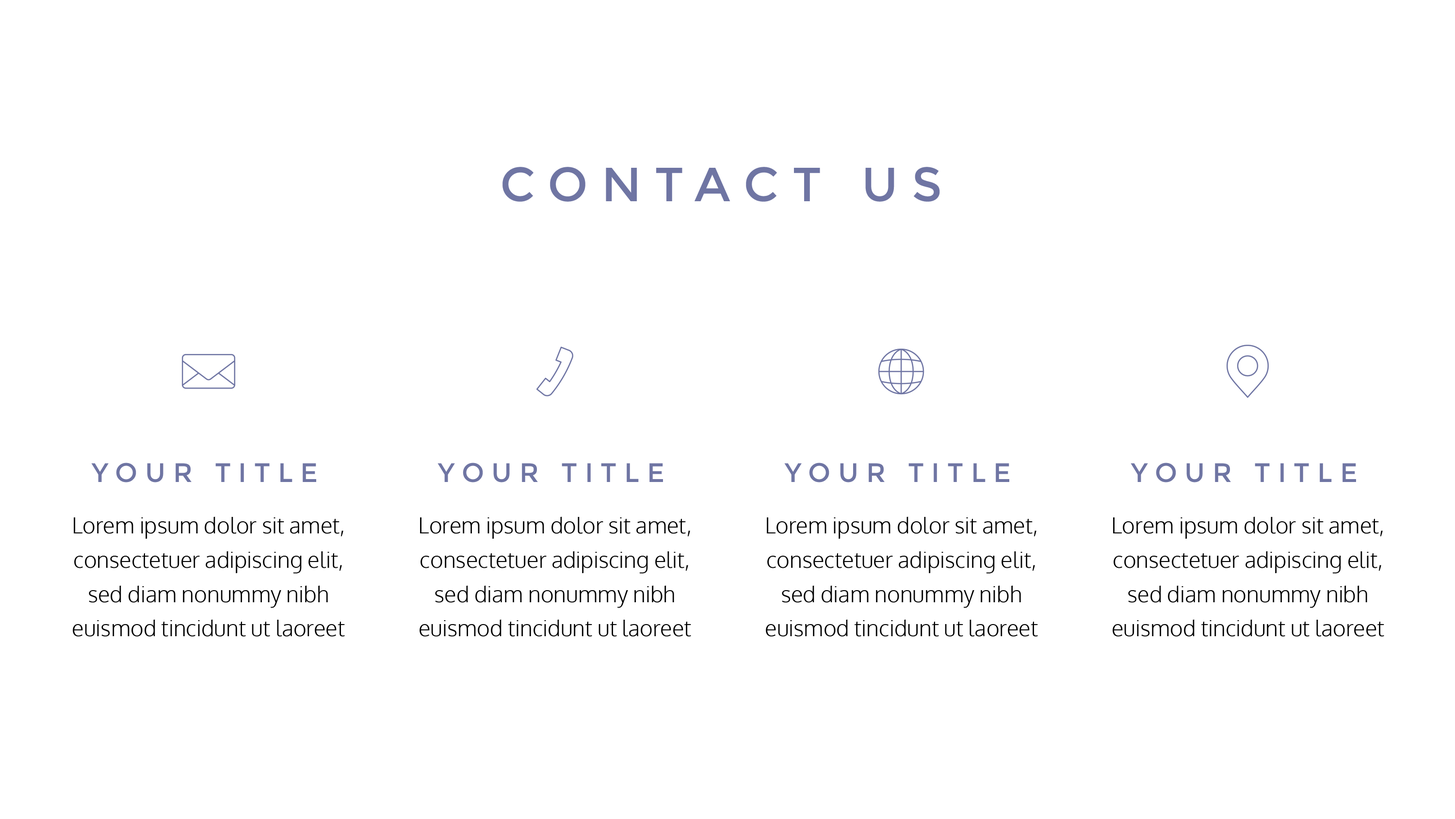
<style>
.page{position:relative;width:1455px;height:819px;background:#ffffff}
.page>*{position:absolute;margin:0}
.t1{font:47.9px "Montserrat-Regular";letter-spacing:0.28em;color:#6f75a3}
.t2{font:26.7px "Montserrat-Regular";letter-spacing:0.28em;color:#6f75a3}
.t3{font:22.2px/34.4px "Oxygen-Light";color:#000000}
</style>
<div class="page">
<p class="t1" style="left:503px;top:167px;width:437px;height:35px">CONTACT US</p>
<p class="t2" style="left:91px;top:463px;width:225px;height:20px">YOUR TITLE</p>
<p class="t2" style="left:438px;top:463px;width:225px;height:20px">YOUR TITLE</p>
<p class="t2" style="left:784px;top:463px;width:226px;height:20px">YOUR TITLE</p>
<p class="t2" style="left:1131px;top:463px;width:225px;height:20px">YOUR TITLE</p>
<p class="t3" style="left:73px;top:517px;width:272px;height:120px;text-align:center">Lorem ipsum dolor sit amet, consectetuer adipiscing elit, sed diam nonummy nibh euismod tincidunt ut laoreet dolore magna aliquam erat volutpat.</p>
<p class="t3" style="left:420px;top:517px;width:271px;height:120px;text-align:center">Lorem ipsum dolor sit amet, consectetuer adipiscing elit, sed diam nonummy nibh euismod tincidunt ut laoreet dolore magna aliquam erat volutpat.</p>
<p class="t3" style="left:766px;top:517px;width:272px;height:120px;text-align:center">Lorem ipsum dolor sit amet, consectetuer adipiscing elit, sed diam nonummy nibh euismod tincidunt ut laoreet dolore magna aliquam erat volutpat.</p>
<p class="t3" style="left:1113px;top:517px;width:272px;height:120px;text-align:center">Lorem ipsum dolor sit amet, consectetuer adipiscing elit, sed diam nonummy nibh euismod tincidunt ut laoreet dolore magna aliquam erat volutpat.</p>
</div>
